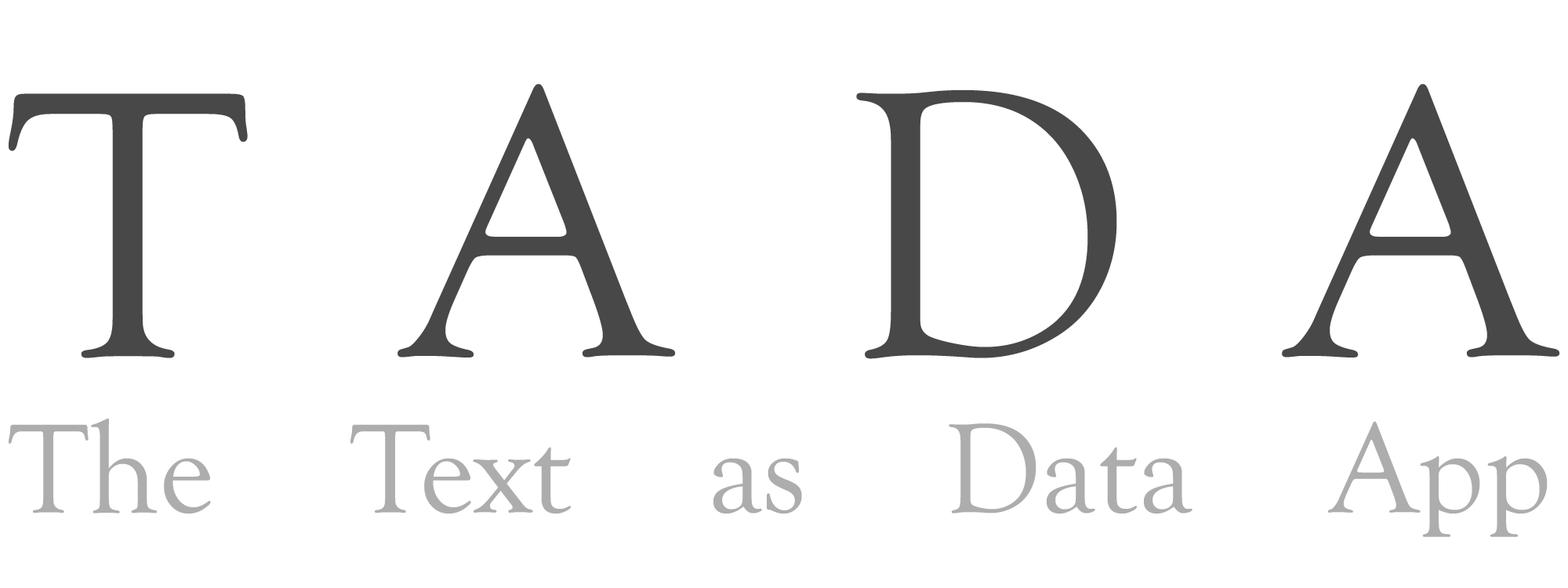
<style>
.page{position:relative;width:1568px;height:588px;background:#ffffff}
.page>*{position:absolute;margin:0}
.t1{font:130.7px "GoudyOldStyleT-Regular";color:#adadad}
.t2{font:392px "GoudyOldStyleT-Regular";color:#484848}
</style>
<div class="page">
<p class="t1" style="left:8px;top:84px;width:1552px;height:453px;text-align:justify"><span class="t2">TADA<br></span>The Text as Data App</p>
</div>
